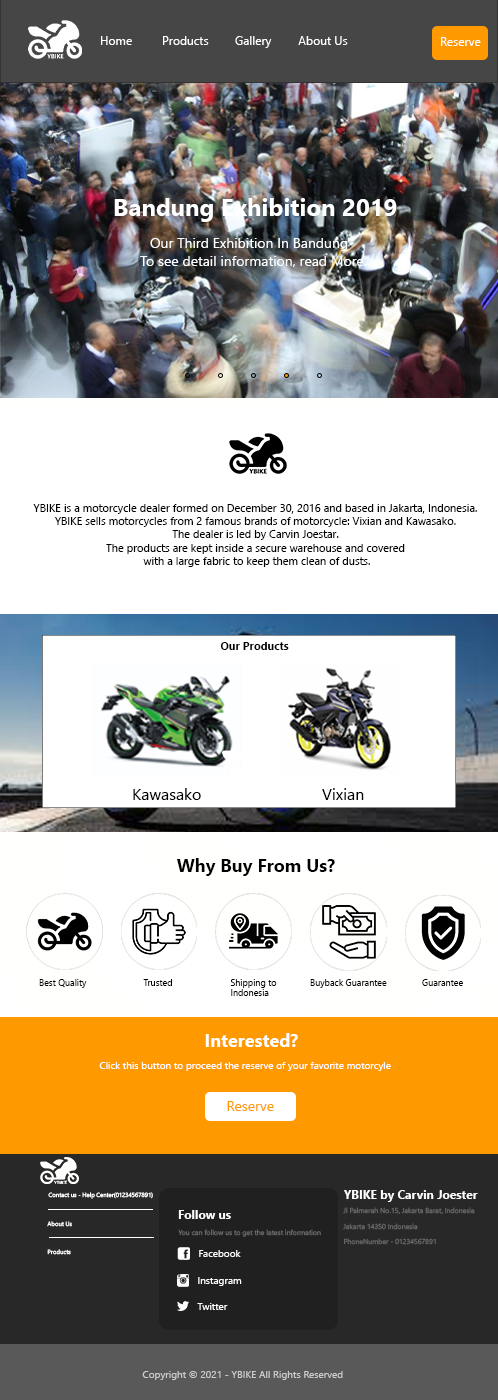
<style>
.page{position:relative;width:498px;height:1400px;background:#ffffff}
.page>*{position:absolute;margin:0}
.t1{font:12px "SegoeUI";color:#ffffff}
.t2{font:24px "SegoeUI-Bold";color:#ffffff}
.t3{font:14px "SegoeUI";color:#ffffff}
.t4{font:11px "SegoeUI";color:#000000}
.t5{font:11px "SegoeUI-Bold";color:#000000}
.t6{font:16px "SegoeUI";color:#000000}
.t7{font:18px "SegoeUI-Bold";color:#000000}
.t8{font:9px "SegoeUI";color:#000000}
.t9{font:18px "SegoeUI-Bold";color:#ffffff}
.t10{font:10px "SegoeUI";color:#ffffff}
.t11{font:14px "SegoeUI";color:#ff9900}
.t12{font:6px "SegoeUI";color:#ffffff}
.t13{font:12px "SegoeUI-Bold";color:#fefcfc}
.t14{font:7px "SegoeUI";color:#666666}
.t15{font:10px "SegoeUI";color:#fefcfc}
.t16{font:10px "SegoeUI";color:#cccccc}
</style>
<div class="page">
<p class="t1" style="left:101px;top:36px;width:31px;height:9px">Home</p>
<p class="t1" style="left:163px;top:36px;width:46px;height:9px">Products</p>
<p class="t1" style="left:235px;top:36px;width:37px;height:12px">Gallery</p>
<p class="t1" style="left:298px;top:36px;width:50px;height:9px">About Us</p>
<p class="t1" style="left:441px;top:37px;width:40px;height:9px">Reserve</p>
<p class="t2" style="left:114px;top:198px;width:283px;height:24px">Bandung Exhibition 2019</p>
<p class="t3" style="left:150px;top:238px;width:198px;height:13px">Our Third Exhibition In Bandung</p>
<p class="t3" style="left:140px;top:256px;width:233px;height:11px">To see detail information, read More...</p>
<p class="t4" style="left:33px;top:504px;width:444px;height:63px;text-align:center">YBIKE is a motorcycle dealer formed on December 30, 2016 and based in Jakarta, Indonesia. <br>YBIKE sells motorcycles from 2 famous brands of motorcycle: Vixian and Kawasako. <br>The dealer is led by Carvin Joestar. <br>The products are kept inside a secure warehouse and covered <br>with a large fabric to keep them clean of dusts.</p>
<p class="t5" style="left:220px;top:642px;width:69px;height:8px">Our Products</p>
<p class="t6" style="left:133px;top:788px;width:68px;height:12px">Kawasako</p>
<p class="t6" style="left:322px;top:788px;width:42px;height:12px">Vixian</p>
<p class="t7" style="left:177px;top:858px;width:158px;height:18px">Why Buy From Us?</p>
<p class="t8" style="left:39px;top:979px;width:48px;height:9px">Best Quality</p>
<p class="t8" style="left:143px;top:979px;width:29px;height:7px">Trusted</p>
<p class="t8" style="left:230px;top:979px;width:47px;height:17px">Shipping to <br>Indonesia</p>
<p class="t8" style="left:310px;top:979px;width:77px;height:9px">Buyback Guarantee</p>
<p class="t8" style="left:422px;top:979px;width:41px;height:7px">Guarantee</p>
<p class="t9" style="left:205px;top:1033px;width:93px;height:14px">Interested?</p>
<p class="t10" style="left:99px;top:1062px;width:292px;height:9px">Click this button to proceed the reserve of your favorite motorcyle</p>
<p class="t11" style="left:227px;top:1101px;width:47px;height:10px">Reserve</p>
<p class="t12" style="left:48px;top:1192px;width:105px;height:7px">Contact us - Help Center(01234567891)</p>
<p class="t13" style="left:344px;top:1190px;width:134px;height:12px">YBIKE by Carvin Joester</p>
<p class="t13" style="left:178px;top:1210px;width:53px;height:9px">Follow us</p>
<p class="t14" style="left:343px;top:1207px;width:132px;height:8px">Jl Palmerah No.15, Jakarta Barat, Indonesia</p>
<p class="t12" style="left:47px;top:1221px;width:25px;height:6px">About Us</p>
<p class="t14" style="left:178px;top:1229px;width:143px;height:8px">You can follow us to get the latest information</p>
<p class="t14" style="left:343px;top:1223px;width:75px;height:7px">Jakarta 14350 Indonesia</p>
<p class="t14" style="left:344px;top:1238px;width:92px;height:7px">PhoneNumber - 01234567891</p>
<p class="t12" style="left:47px;top:1249px;width:24px;height:6px">Products</p>
<p class="t15" style="left:199px;top:1250px;width:42px;height:7px">Facebook</p>
<p class="t15" style="left:198px;top:1277px;width:44px;height:9px">Instagram</p>
<p class="t15" style="left:197px;top:1303px;width:31px;height:7px">Twitter</p>
<p class="t16" style="left:142px;top:1371px;width:201px;height:9px">Copyright © 2021 - YBIKE All Rights Reserved</p>
</div>
